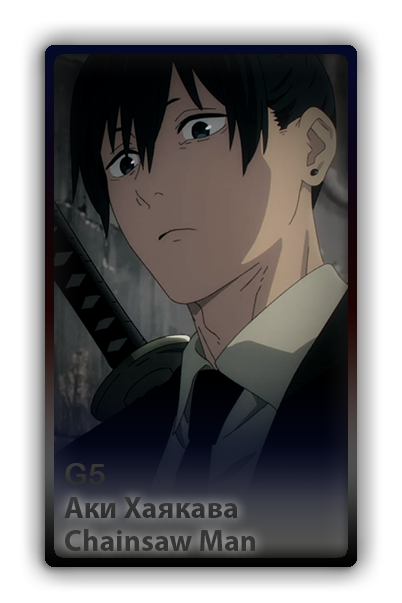
<style>
.page{position:relative;width:402px;height:603px}
.page>*{position:absolute;margin:0}
.t1{font:30px "ArialRoundedMTBold";color:#333333}
.t2{font:30px "MyriadPro-Bold";color:#242424}
.t3{font:30px "MyriadPro-Bold";color:#353535}
</style>
<div class="page">
<p class="t1" style="left:65px;top:463px;width:40px;height:22px">G5</p>
<p class="t2" style="left:64px;top:497px;width:174px;height:21px">Аки Хаякава</p>
<p class="t3" style="left:65px;top:529px;width:190px;height:22px">Chainsaw Man</p>
</div>
